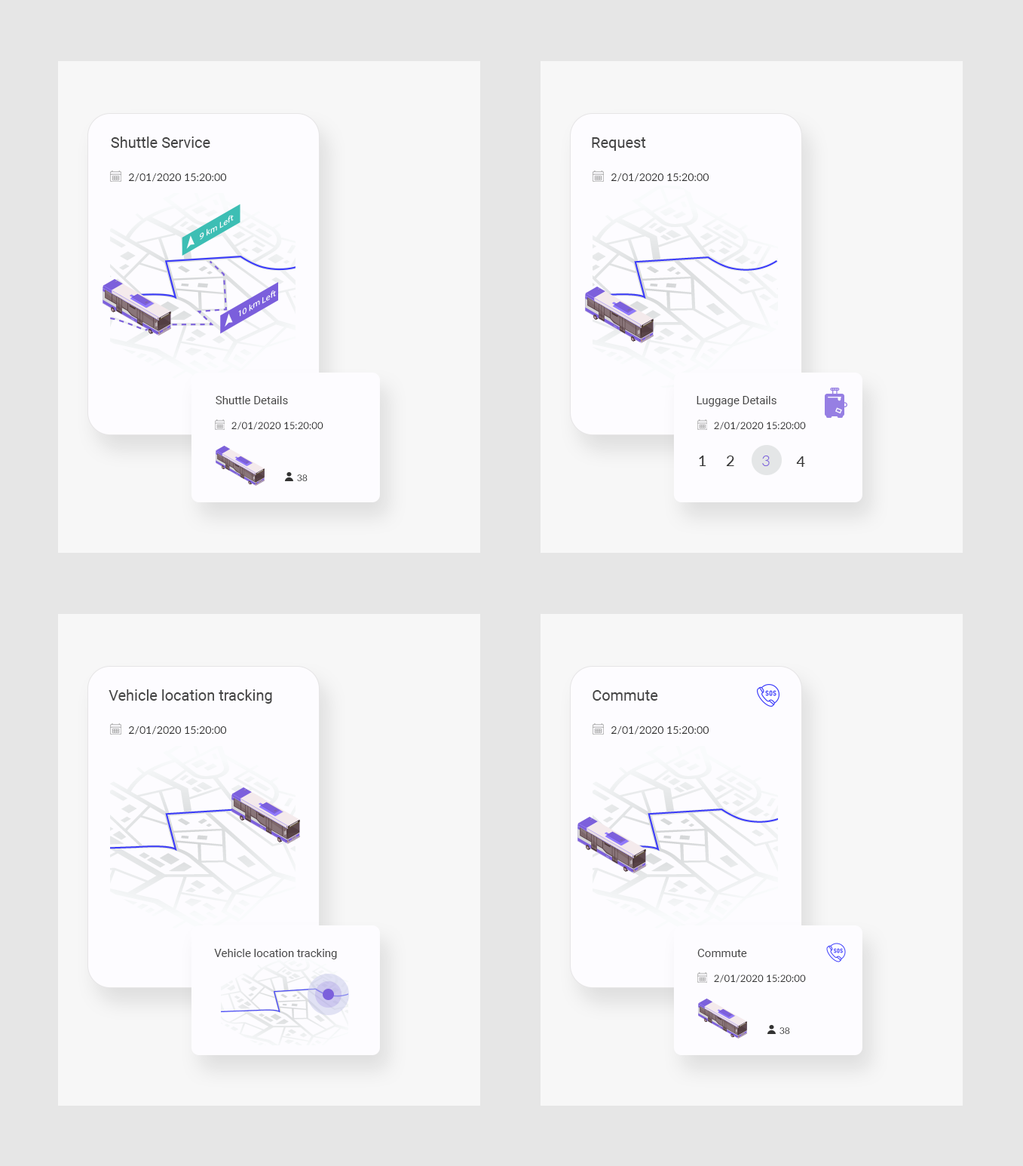
<style>
.page{position:relative;width:1023px;height:1166px;background:#e6e6e6}
.page>*{position:absolute;margin:0}
.t1{font:15.1px "Roboto-Regular";color:#444444}
.t2{font:10.6px "Lato-Regular";color:#333333}
.t3{font:11.3px "Roboto-Regular";color:#444444}
.t4{font:9.8px "Lato-Regular";color:#333333}
.t5{font:15.1px "Lato-Regular";color:#333333}
.t6{font:15.1px "Lato-Light";color:#7c60dc}
.t7{font:9px "Lato-Regular";color:#333333}
</style>
<div class="page">
<p class="t1" style="left:111px;top:136px;width:99px;height:12px">Shuttle Service</p>
<p class="t1" style="left:592px;top:137px;width:54px;height:14px">Request</p>
<p class="t2" style="left:129px;top:173px;width:97px;height:9px">2/01/2020 15:20:00</p>
<p class="t2" style="left:611px;top:173px;width:98px;height:9px">2/01/2020 15:20:00</p>
<p class="t3" style="left:216px;top:396px;width:72px;height:8px">Shuttle Details</p>
<p class="t3" style="left:697px;top:396px;width:80px;height:10px">Luggage Details</p>
<p class="t4" style="left:231px;top:421px;width:92px;height:9px">2/01/2020 15:20:00</p>
<p class="t4" style="left:714px;top:421px;width:92px;height:9px">2/01/2020 15:20:00</p>
<p class="t5" style="left:699px;top:455px;width:7px;height:11px">1</p>
<p class="t5" style="left:726px;top:455px;width:8px;height:11px">2</p>
<p class="t6" style="left:762px;top:455px;width:8px;height:11px">3</p>
<p class="t5" style="left:796px;top:456px;width:9px;height:11px">4</p>
<p class="t7" style="left:297px;top:474px;width:11px;height:7px">38</p>
<p class="t1" style="left:109px;top:689px;width:163px;height:14px">Vehicle location tracking</p>
<p class="t1" style="left:593px;top:690px;width:65px;height:10px">Commute</p>
<p class="t2" style="left:129px;top:725px;width:97px;height:9px">2/01/2020 15:20:00</p>
<p class="t2" style="left:611px;top:725px;width:98px;height:9px">2/01/2020 15:20:00</p>
<p class="t3" style="left:214px;top:948px;width:123px;height:11px">Vehicle location tracking</p>
<p class="t3" style="left:697px;top:948px;width:50px;height:9px">Commute</p>
<p class="t4" style="left:714px;top:974px;width:92px;height:8px">2/01/2020 15:20:00</p>
<p class="t7" style="left:780px;top:1027px;width:10px;height:7px">38</p>
</div>
